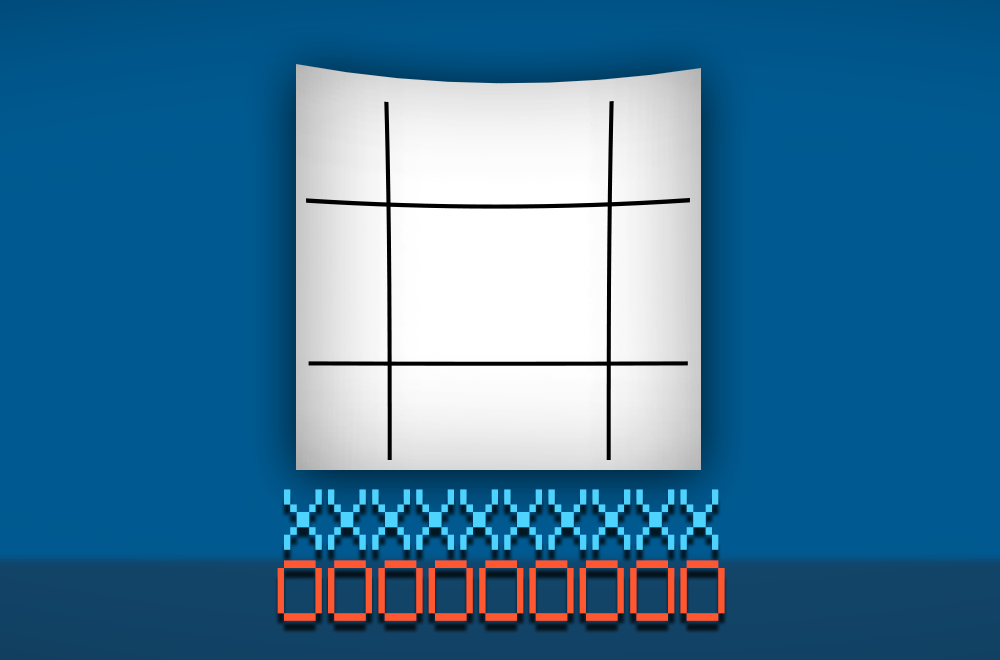
<style>
.page{position:relative;width:1000px;height:660px;background:#005a91}
.page>*{position:absolute;margin:0}
.t1{font:80.4px "Small Fonts";color:#4ed3ff}
.t2{font:80.4px "Small Fonts";color:#ff5730}
</style>
<div class="page">
<p class="t1" style="left:284px;top:489px;width:435px;height:61px">XXXXXXXXXX</p>
<p class="t2" style="left:277px;top:560px;width:448px;height:61px">OOOOOOOOO</p>
</div>
